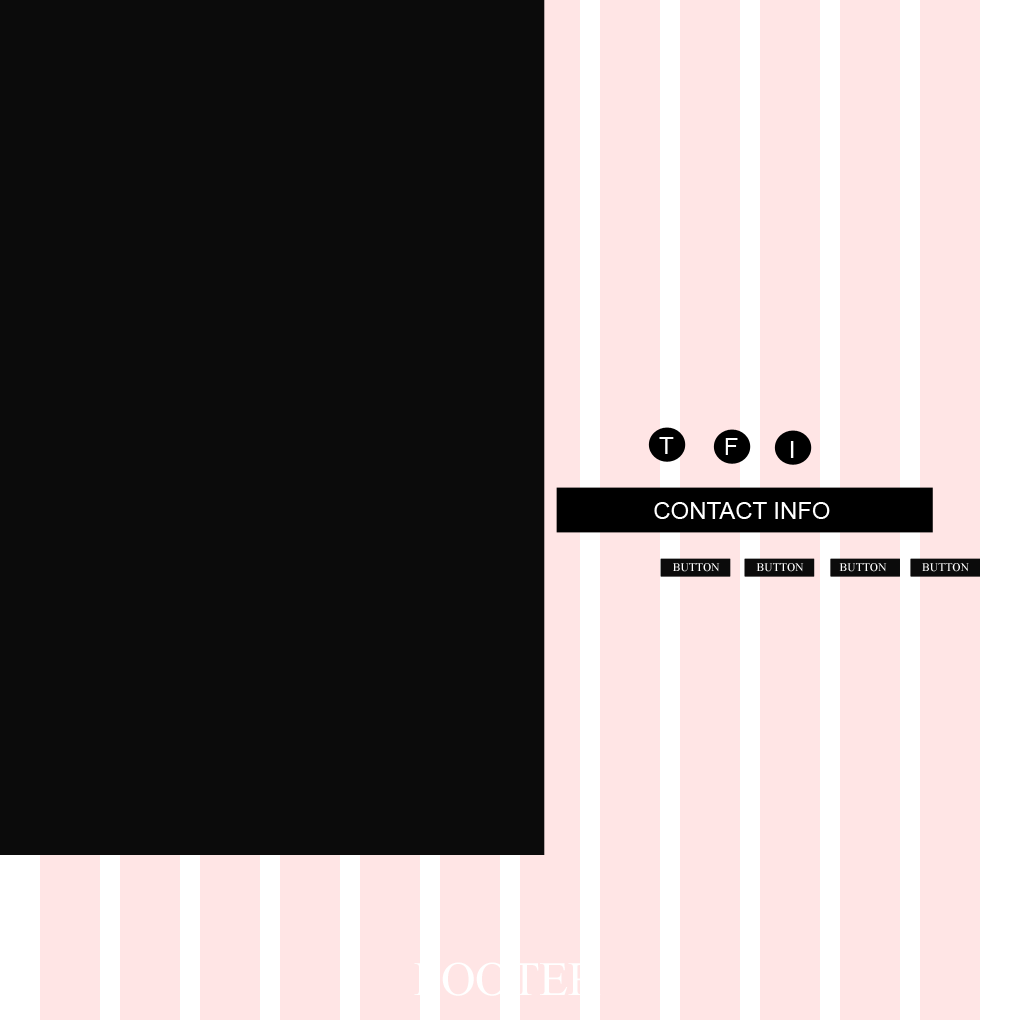
<style>
.page{position:relative;width:1020px;height:1020px;background:#0b0b0b}
.page>*{position:absolute;margin:0}
.t1{font:23.9px "ArialMT";color:#ffffff;text-transform:uppercase}
.t2{font:11.6px "TimesNewRomanPSMT";color:#ffffff}
.t3{font:47.8px "TimesNewRomanPSMT";color:#ffffff}
</style>
<div class="page">
<p class="t1" style="left:659px;top:437px;width:15px;height:17px">T</p>
<p class="t1" style="left:725px;top:438px;width:13px;height:17px">F</p>
<p class="t1" style="left:790px;top:441px;width:4px;height:17px">I</p>
<p class="t1" style="left:654px;top:502px;width:176px;height:17px">CONTACT INFO</p>
<p class="t2" style="left:673px;top:563px;width:47px;height:9px">BUTTON</p>
<p class="t2" style="left:756px;top:563px;width:48px;height:9px">BUTTON</p>
<p class="t2" style="left:839px;top:563px;width:48px;height:9px">BUTTON</p>
<p class="t2" style="left:922px;top:563px;width:47px;height:9px">BUTTON</p>
<p class="t3" style="left:414px;top:962px;width:187px;height:34px">FOOTER</p>
</div>
